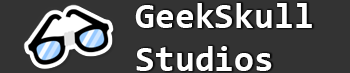
<style>
.page{position:relative;width:350px;height:73px;background:#333333}
.page>*{position:absolute;margin:0}
.t1{font:36px "Consolas-Bold";color:#ffffff}
</style>
<div class="page">
<p class="t1" style="left:135px;top:3px;width:177px;height:68px">GeekSkull<br>Studios</p>
</div>
